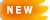
<style>
.page{position:relative;width:50px;height:20px}
.page>*{position:absolute;margin:0}
.t1{font:9.6px "Verdana";letter-spacing:0.24em;color:#ffffff;font-weight:bold;scale:0.94 1}
</style>
<div class="page">
<p class="t1" style="left:7px;top:6px;width:26px;height:8px">NEW</p>
</div>
